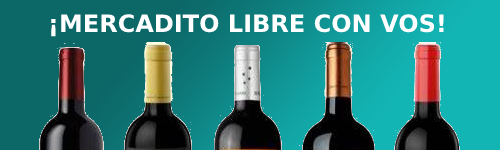
<style>
.page{position:relative;width:500px;height:150px}
.page>*{position:absolute;margin:0}
.t1{font:24px "DejaVuSans-Bold";color:#ffffff}
</style>
<div class="page">
<p class="t1" style="left:51px;top:14px;width:393px;height:23px">¡MERCADITO LIBRE CON VOS!</p>
</div>
